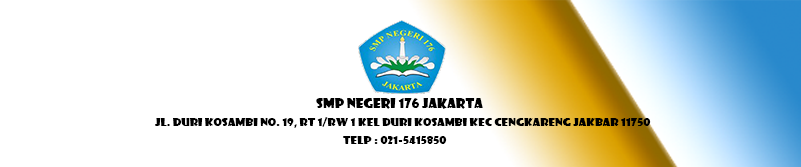
<style>
.page{position:relative;width:801px;height:167px;background:#ffffff}
.page>*{position:absolute;margin:0}
.t1{font:12.6px "ShowcardGothic-Reg";color:#000000;scale:1.11 1}
.t2{font:10.8px "ShowcardGothic-Reg";color:#000000;scale:1.11 1}
</style>
<div class="page">
<p class="t1" style="left:316px;top:98px;width:167px;height:11px">SMP NEGERI 176 JAKARTA</p>
<p class="t2" style="left:155px;top:117px;width:496px;height:11px">Jl. Duri Kosambi No. 19, RT 1/Rw 1 KeL Duri Kosambi Kec Cengkareng Jakbar 11750</p>
<p class="t2" style="left:343px;top:136px;width:104px;height:8px">Telp : 021-5415850</p>
</div>
